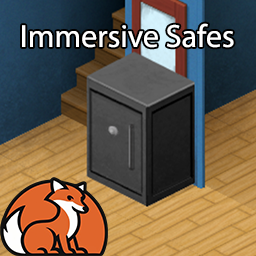
<style>
.page{position:relative;width:256px;height:256px}
.page>*{position:absolute;margin:0}
.t1{font:32px "MyriadPro-Regular";color:#ffffff}
</style>
<div class="page">
<p class="t1" style="left:22px;top:23px;width:212px;height:25px">Immersive Safes</p>
</div>
